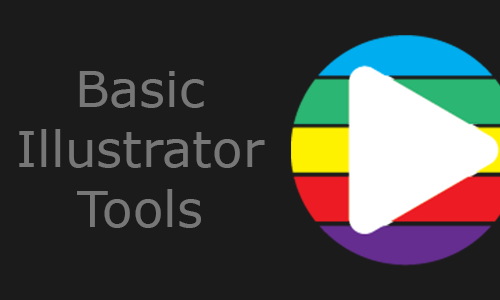
<style>
.page{position:relative;width:500px;height:300px;background:#1b1b1b}
.page>*{position:absolute;margin:0}
.t1{font:50px "Verdana";color:#777777}
</style>
<div class="page">
<p class="t1" style="left:19px;top:71px;width:246px;height:157px;text-align:center">Basic<br>Illustrator<br>Tools</p>
</div>
